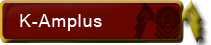
<style>
.page{position:relative;width:211px;height:45px;background:#650600}
.page>*{position:absolute;margin:0}
.t1{font:18px "MicrosoftSansSerif";letter-spacing:0.04em;color:#ffffff}
</style>
<div class="page">
<p class="t1" style="left:20px;top:14px;width:82px;height:17px">K-Amplus</p>
</div>
